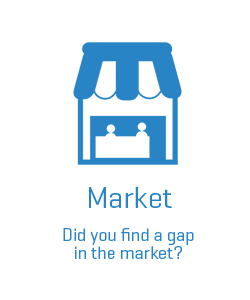
<style>
.page{position:relative;width:250px;height:300px;background:#ffffff}
.page>*{position:absolute;margin:0}
.t1{font:30px "Geogrotesque-Regular";color:#2884c5}
.t2{font:18px/18px "Geogrotesque-Regular";color:#2884c5}
</style>
<div class="page">
<p class="t1" style="left:89px;top:186px;width:83px;height:22px">Market</p>
<p class="t2" style="left:63px;top:228px;width:131px;height:31px;text-align:center">Did you find a gap in the market?</p>
</div>
